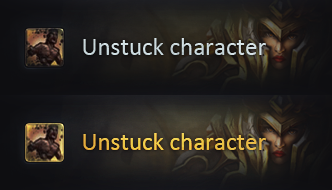
<style>
.page{position:relative;width:332px;height:190px}
.page>*{position:absolute;margin:0}
.t1{font:25px "Calibri";color:#d9e7eb}
.t2{font:25px "Calibri";color:#edc748}
</style>
<div class="page">
<p class="t1" style="left:83px;top:38px;width:183px;height:17px">Unstuck character</p>
<p class="t2" style="left:83px;top:133px;width:183px;height:17px">Unstuck character</p>
</div>
